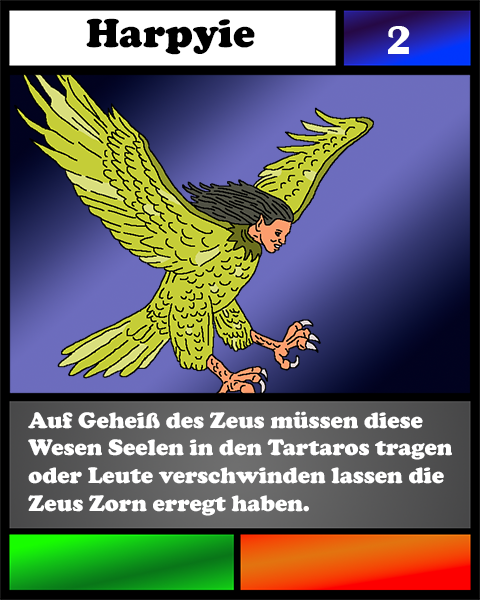
<style>
.page{position:relative;width:480px;height:600px}
.page>*{position:absolute;margin:0}
.t1{font:41.7px "CooperBlack";color:#000000}
.t2{font:41.7px "BritannicBold";color:#ffffff}
.t3{font:23.1px "CooperBlack";color:#ffffff}
</style>
<div class="page">
<p class="t1" style="left:86px;top:18px;width:169px;height:37px">Harpyie</p>
<p class="t2" style="left:388px;top:26px;width:22px;height:28px">2</p>
<p class="t3" style="left:28px;top:411px;width:424px;height:105px">Auf Geheiß des Zeus müssen diese <br>Wesen Seelen in den Tartaros tragen <br>oder Leute verschwinden lassen die <br>Zeus Zorn erregt haben.</p>
</div>
